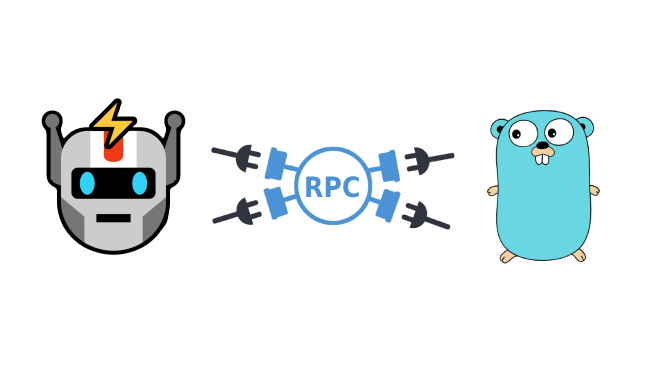
<style>
.page{position:relative;width:666px;height:375px;background:#ffffff}
.page>*{position:absolute;margin:0}
.t1{font:28px "DejaVuSansCondensed-Bold";color:#4c93d5}
</style>
<div class="page">
<p class="t1" style="left:306px;top:176px;width:53px;height:22px">RPC</p>
</div>
